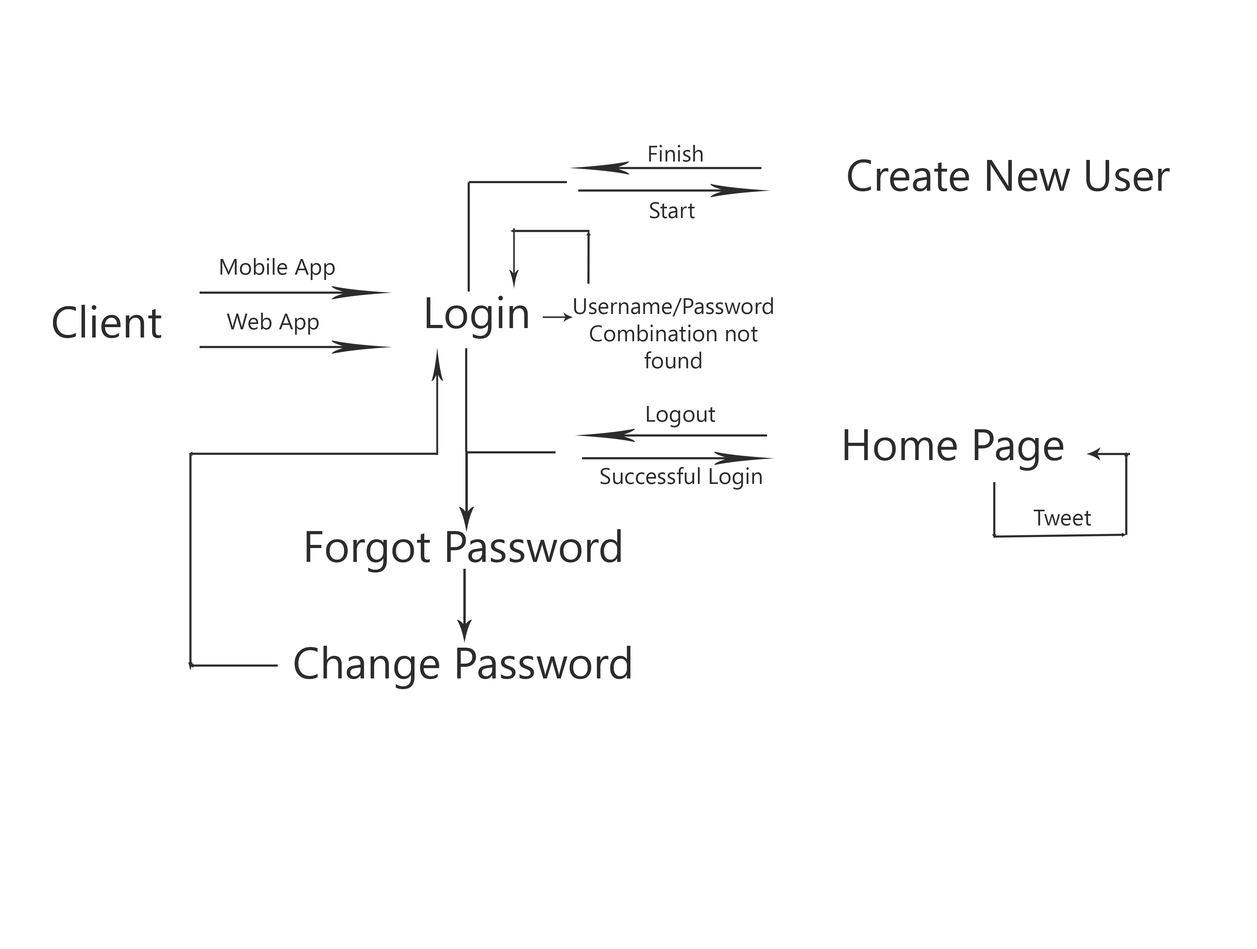
<style>
.page{position:relative;width:1257px;height:949px;background:#ffffff}
.page>*{position:absolute;margin:0}
.t1{font:22.6px "SegoeUISymbol";color:#2c2c2c}
.t2{font:44px "SegoeUISymbol";color:#2c2c2c}
</style>
<div class="page">
<p class="t1" style="left:649px;top:145px;width:54px;height:17px">Finish</p>
<p class="t2" style="left:848px;top:159px;width:321px;height:32px">Create New User</p>
<p class="t1" style="left:650px;top:202px;width:45px;height:16px">Start</p>
<p class="t1" style="left:220px;top:258px;width:115px;height:22px">Mobile App</p>
<p class="t2" style="left:53px;top:305px;width:108px;height:33px">Client</p>
<p class="t2" style="left:426px;top:296px;width:102px;height:43px">Login</p>
<p class="t1" style="left:574px;top:297px;width:199px;height:72px;text-align:center">Username/Password Combination not found</p>
<p class="t1" style="left:227px;top:313px;width:92px;height:22px">Web App</p>
<p class="t1" style="left:647px;top:406px;width:68px;height:21px">Logout</p>
<p class="t2" style="left:844px;top:429px;width:219px;height:42px">Home Page</p>
<p class="t1" style="left:600px;top:467px;width:162px;height:22px">Successful Login</p>
<p class="t1" style="left:1033px;top:510px;width:58px;height:16px">Tweet</p>
<p class="t2" style="left:306px;top:529px;width:315px;height:43px">Forgot Password</p>
<p class="t2" style="left:294px;top:646px;width:337px;height:43px">Change Password</p>
</div>
